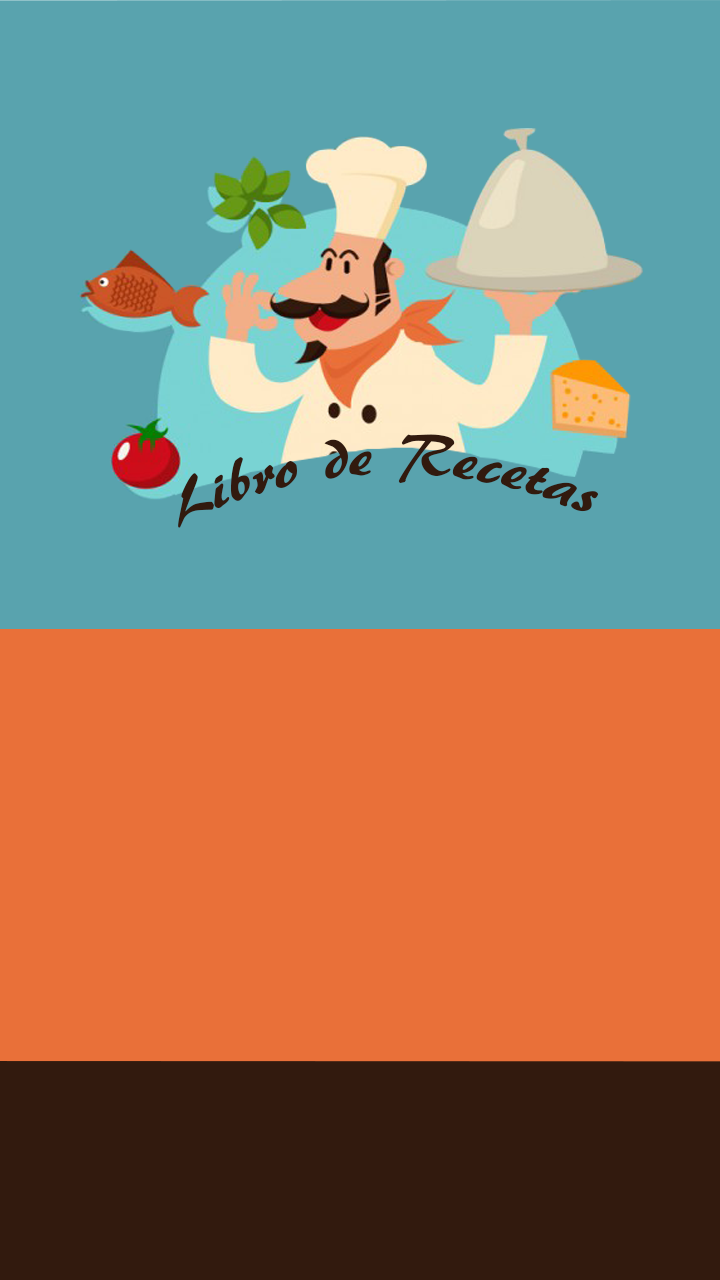
<style>
.page{position:relative;width:720px;height:1280px;background:#e97039}
.page>*{position:absolute;margin:0}
.t1{font:58.3px "ARBERKLEY";color:#321a0e;scale:0.95 1}
</style>
<div class="page">
<p class="t1" style="left:178px;top:434px;width:421px;height:94px;rotate:2deg">Libro de Recetas</p>
</div>
